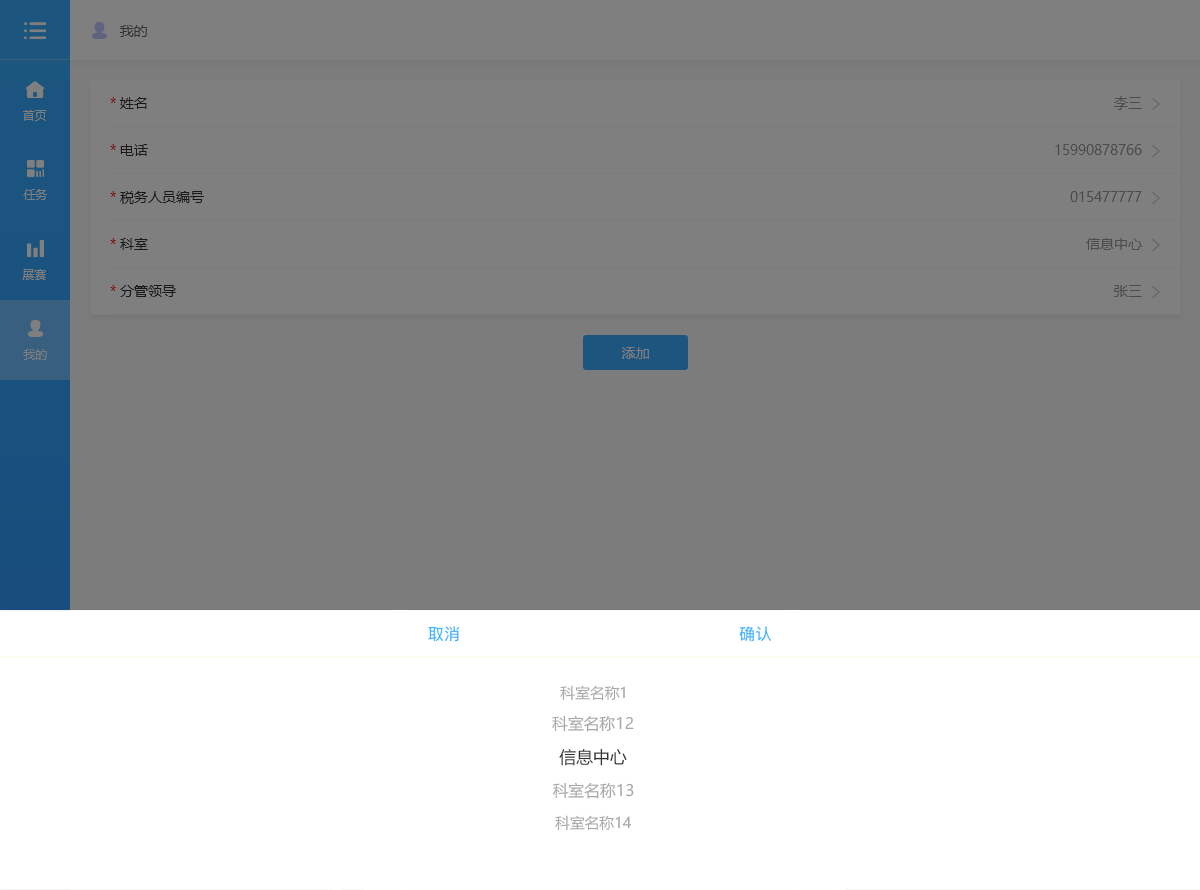
<style>
.page{position:relative;width:1200px;height:890px;background:#7c7c7c}
.page>*{position:absolute;margin:0}
.t1{font:14px "MicrosoftYaHei";color:#333333}
.t2{font:14px "MicrosoftYaHei";color:#191919}
.t3{font:14px "MicrosoftYaHei";color:#4c4c4c}
.t4{font:12px "MicrosoftYaHei";color:#7f7f7f}
.t5{font:14px "MicrosoftYaHei";color:#7f7f7f}
.t6{font:14.8px "MicrosoftYaHei";color:#a8a8a8}
.t7{font:15.8px "MicrosoftYaHei";color:#a8a8a8}
.t8{font:16.9px "MicrosoftYaHei";color:#333333}
</style>
<div class="page">
<p class="t1" style="left:119px;top:25px;width:28px;height:12px">我的</p>
<p class="t2" style="left:110px;top:97px;width:37px;height:12px">* 姓名</p>
<p class="t3" style="left:1114px;top:96px;width:28px;height:14px">李三</p>
<p class="t4" style="left:23px;top:110px;width:24px;height:11px">首页</p>
<p class="t2" style="left:110px;top:144px;width:38px;height:12px">* 电话</p>
<p class="t3" style="left:1055px;top:144px;width:87px;height:11px">15990878766</p>
<p class="t4" style="left:23px;top:189px;width:24px;height:11px">任务</p>
<p class="t2" style="left:110px;top:191px;width:94px;height:13px">* 税务人员编号</p>
<p class="t3" style="left:1070px;top:191px;width:72px;height:11px">015477777</p>
<p class="t2" style="left:110px;top:238px;width:38px;height:12px">* 科室</p>
<p class="t3" style="left:1086px;top:238px;width:56px;height:12px">信息中心</p>
<p class="t4" style="left:22px;top:269px;width:24px;height:11px">展赛</p>
<p class="t2" style="left:110px;top:285px;width:66px;height:12px">* 分管领导</p>
<p class="t3" style="left:1114px;top:285px;width:28px;height:12px">张三</p>
<p class="t4" style="left:23px;top:349px;width:24px;height:11px">我的</p>
<p class="t5" style="left:622px;top:347px;width:27px;height:12px">添加</p>
<p class="t6" style="left:560px;top:685px;width:65px;height:16px">科室名称1</p>
<p class="t7" style="left:552px;top:715px;width:82px;height:17px">科室名称12</p>
<p class="t8" style="left:559px;top:748px;width:68px;height:18px">信息中心</p>
<p class="t7" style="left:553px;top:782px;width:81px;height:17px">科室名称13</p>
<p class="t6" style="left:555px;top:815px;width:76px;height:16px">科室名称14</p>
</div>
